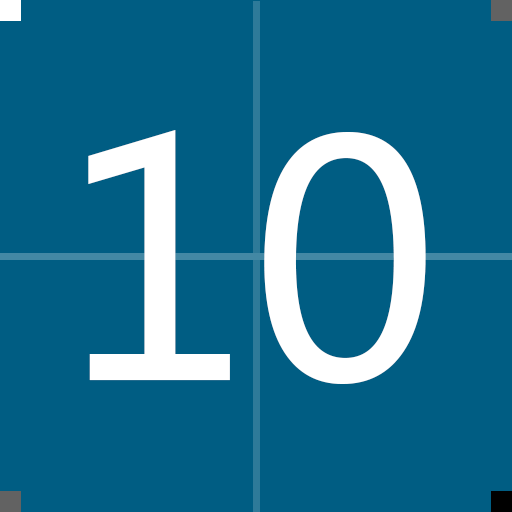
<style>
.page{position:relative;width:512px;height:512px;background:#005d83}
.page>*{position:absolute;margin:0}
.t1{font:323.1px "MicrosoftYaHei";color:#ffffff}
</style>
<div class="page">
<p class="t1" style="left:88px;top:130px;width:338px;height:254px">10</p>
</div>
